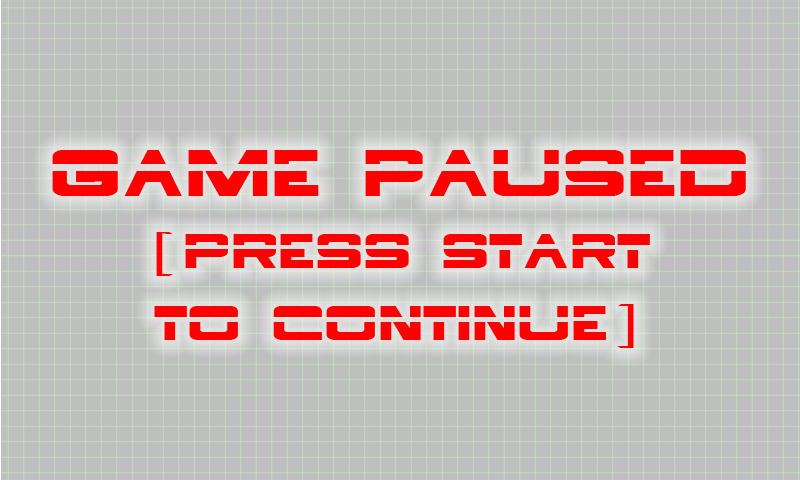
<style>
.page{position:relative;width:800px;height:480px;background:#bfbfbf}
.page>*{position:absolute;margin:0}
.t1{font:60px "Borg9";color:#ff0000}
.t2{font:81px "Borg9";color:#ff0000}
</style>
<div class="page">
<p class="t1" style="left:52px;top:150px;width:694px;height:198px;text-align:center"><span class="t2">Game Paused<br></span>(press start<br>to Continue}</p>
</div>
